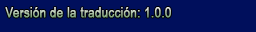
<style>
.page{position:relative;width:256px;height:32px;background:#000f5c}
.page>*{position:absolute;margin:0}
.t1{font:14px "ArialNarrow";font-weight:bold}
</style>
<div class="page">
<p class="t1" style="left:5px;top:7px;width:166px;height:11px">Versión de la traducción: 1.0.0</p>
</div>
